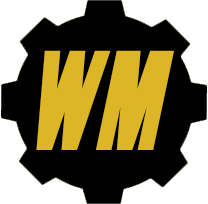
<style>
.page{position:relative;width:208px;height:204px;background:#000000}
.page>*{position:absolute;margin:0}
.t1{font:145px "Overseer-Italic";color:#dcb626;scale:0.79 1}
</style>
<div class="page">
<p class="t1" style="left:36px;top:50px;width:138px;height:100px">WM</p>
</div>
